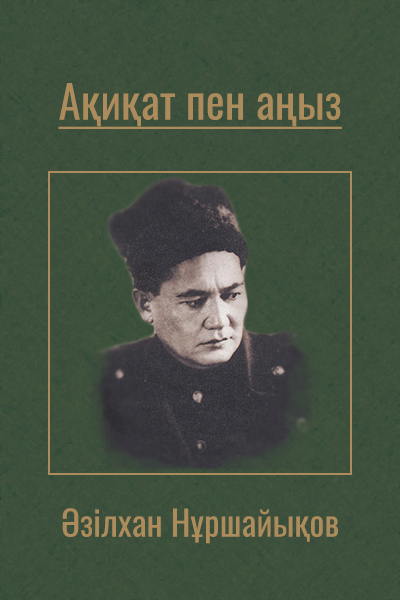
<style>
.page{position:relative;width:400px;height:600px}
.page>*{position:absolute;margin:0}
.t1{font:45px "Oswald-Regular";color:#ac8c5c;text-decoration:underline}
.t2{font:35px "Oswald-Regular";color:#ac8c5c}
</style>
<div class="page">
<p class="t1" style="left:58px;top:83px;width:284px;height:46px">Ақиқат пен аңыз</p>
<p class="t2" style="left:62px;top:508px;width:276px;height:36px">Әзілхан Нұршайықов</p>
</div>
